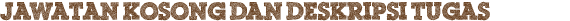
<style>
.page{position:relative;width:570px;height:21px;background:#ffffff}
.page>*{position:absolute;margin:0}
.t1{font:24px "ScribbleBoxDEMO";color:#684121}
</style>
<div class="page">
<p class="t1" style="left:0px;top:1px;width:490px;height:20px">Jawatan Kosong dan Deskripsi Tugas</p>
</div>
